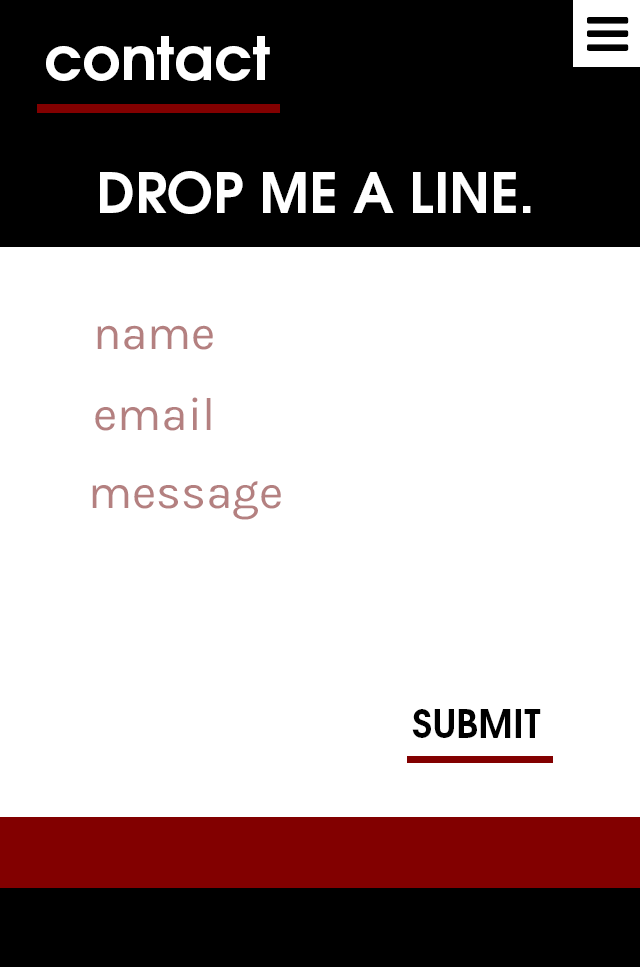
<style>
.page{position:relative;width:640px;height:967px;background:#ffffff}
.page>*{position:absolute;margin:0}
.t1{font:60px "TeXGyreAdventor-Bold";color:#ffffff}
.t2{font:55px "TeXGyreAdventor-Bold";color:#ffffff}
.t3{font:47.2px "Karla-Regular";color:#b48080}
.t4{font:47.1px "Karla-Regular";color:#b48080}
.t5{font:38.4px "TeXGyreAdventor-Bold";color:#000000}
</style>
<div class="page">
<p class="t1" style="left:46px;top:36px;width:224px;height:45px">contact</p>
<p class="t2" style="left:100px;top:171px;width:431px;height:43px">DROP ME A LINE.</p>
<p class="t3" style="left:97px;top:325px;width:116px;height:25px">name</p>
<p class="t4" style="left:95px;top:397px;width:116px;height:34px">email</p>
<p class="t4" style="left:92px;top:481px;width:189px;height:39px">message</p>
<p class="t5" style="left:412px;top:709px;width:129px;height:29px">SUBMIT</p>
</div>
